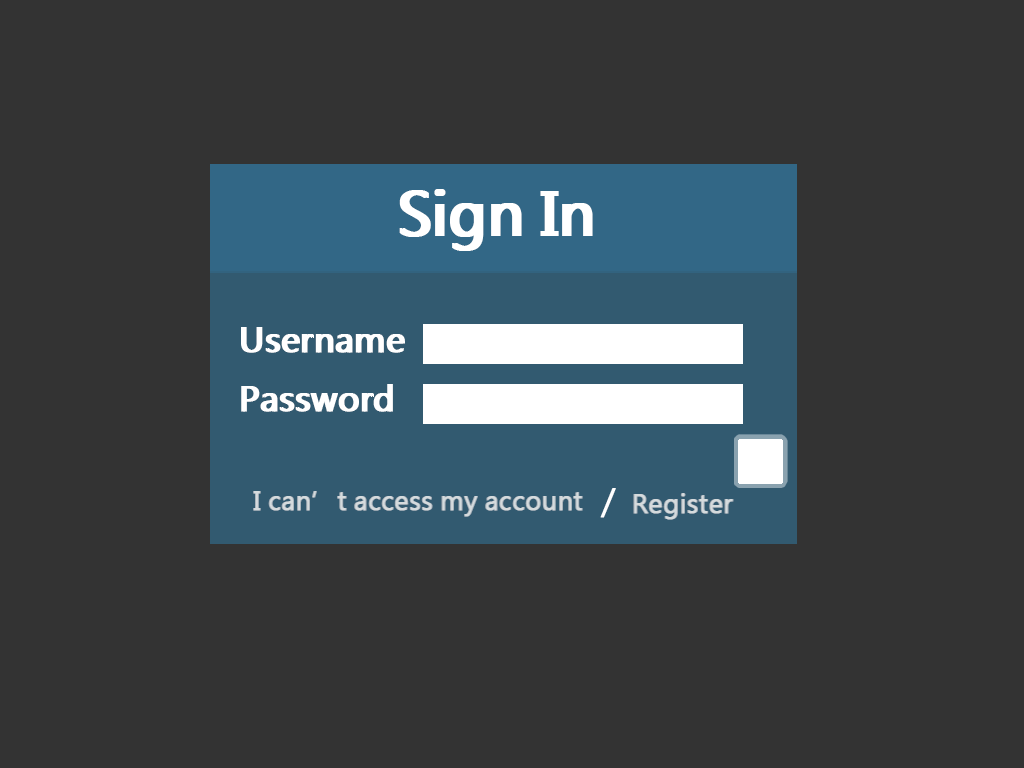
<style>
.page{position:relative;width:1024px;height:768px;background:#333333}
.page>*{position:absolute;margin:0}
.t1{font:58.3px "MicrosoftJhengHeiRegular";color:#ffffff;font-weight:bold}
.t2{font:33.3px "MicrosoftJhengHeiRegular";color:#ffffff;font-weight:bold}
.t3{font:25px "MicrosoftJhengHeiRegular";color:#d5dbdd;font-weight:bold}
</style>
<div class="page">
<p class="t1" style="left:399px;top:189px;width:191px;height:62px">Sign In</p>
<p class="t1" style="left:402px;top:189px;width:191px;height:62px">Sign In</p>
<p class="t2" style="left:241px;top:327px;width:162px;height:85px">Username<br>Password</p>
<p class="t2" style="left:243px;top:327px;width:162px;height:85px">Username<br>Password</p>
<p class="t3" style="left:253px;top:491px;width:329px;height:26px">I can’t access my account</p>
<p class="t3" style="left:254px;top:491px;width:329px;height:26px">I can’t access my account</p>
<p class="t2" style="left:600px;top:488px;width:16px;height:30px">/</p>
<p class="t3" style="left:633px;top:493px;width:100px;height:27px">Register</p>
<p class="t3" style="left:634px;top:493px;width:100px;height:27px">Register</p>
</div>
